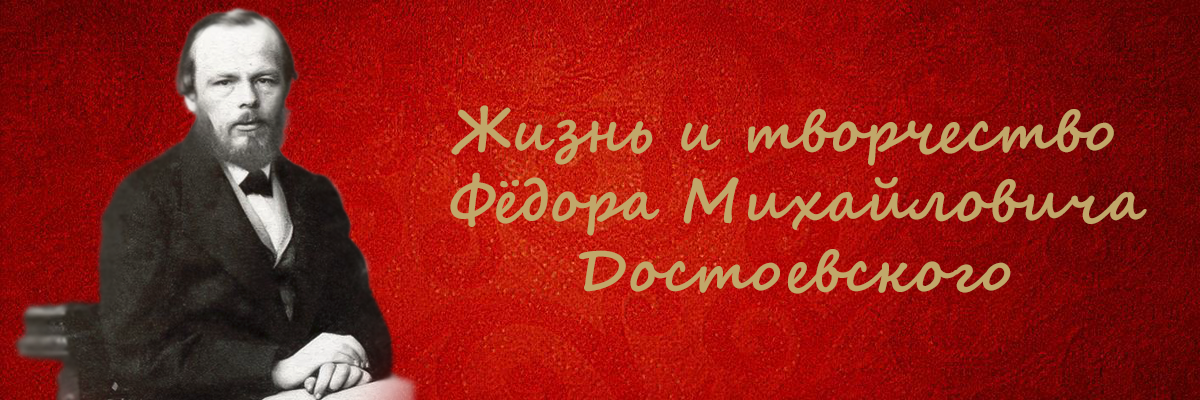
<style>
.page{position:relative;width:1200px;height:400px}
.page>*{position:absolute;margin:0}
.t1{font:58.3px "SegoeScript-Bold";color:#c1a76a}
</style>
<div class="page">
<p class="t1" style="left:450px;top:105px;width:697px;height:189px;text-align:center">Жизнь и творчество <br>Фёдора Михайловича<br>Достоевского</p>
</div>
